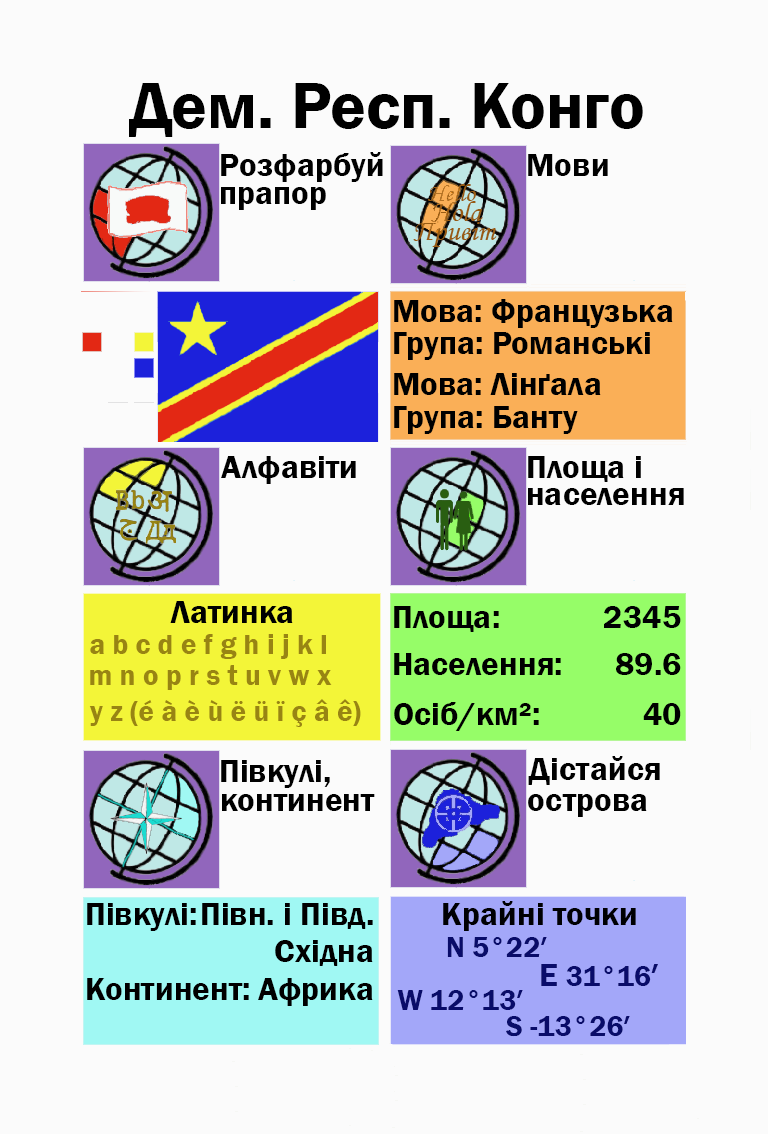
<style>
.page{position:relative;width:768px;height:1134px;background:#fbfbfb}
.page>*{position:absolute;margin:0}
.t1{font:66.7px "FranklinGothic-Demi";color:#000000}
.t2{font:33.3px "FranklinGothic-Demi";color:#000000}
.t3{font:33.3px "FranklinGothic-Demi";color:#000003}
.t4{font:29.2px "FranklinGothic-Demi";color:#988413}
.t5{font:29.2px "FranklinGothic-Demi";color:#090c69}
.t6{font:33.3px "FranklinGothic-Demi";color:#090c69}
</style>
<div class="page">
<p class="t1" style="left:129px;top:83px;width:514px;height:54px">Дем. Респ. Конго</p>
<p class="t2" style="left:221px;top:152px;width:162px;height:30px">Розфарбуй</p>
<p class="t2" style="left:528px;top:154px;width:80px;height:22px">Мови</p>
<p class="t2" style="left:221px;top:187px;width:105px;height:23px">прапор</p>
<p class="t2" style="left:394px;top:299px;width:279px;height:29px">Мова: Французька</p>
<p class="t2" style="left:394px;top:332px;width:256px;height:28px">Група: Романські</p>
<p class="t2" style="left:394px;top:373px;width:207px;height:22px">Мова: Лінґала</p>
<p class="t2" style="left:394px;top:406px;width:184px;height:28px">Група: Банту</p>
<p class="t2" style="left:221px;top:456px;width:135px;height:28px">Алфавіти</p>
<p class="t2" style="left:528px;top:456px;width:113px;height:26px">Площа і</p>
<p class="t2" style="left:528px;top:488px;width:156px;height:17px">населення</p>
<p class="t2" style="left:170px;top:601px;width:123px;height:22px">Латинка</p>
<p class="t2" style="left:394px;top:606px;width:105px;height:26px">Площа:</p>
<p class="t3" style="left:604px;top:606px;width:77px;height:22px">2345</p>
<p class="t4" style="left:90px;top:634px;width:236px;height:25px">a b c d e f g h i j k l</p>
<p class="t2" style="left:394px;top:653px;width:167px;height:22px">Населення:</p>
<p class="t2" style="left:616px;top:653px;width:65px;height:22px">89.6</p>
<p class="t4" style="left:90px;top:665px;width:242px;height:25px">m n o p r s t u v w x</p>
<p class="t4" style="left:89px;top:699px;width:272px;height:28px">y z (é à è ù ë ü ï ç â ê)</p>
<p class="t2" style="left:394px;top:702px;width:145px;height:29px">Осіб/км²:</p>
<p class="t2" style="left:643px;top:703px;width:38px;height:22px">40</p>
<p class="t2" style="left:221px;top:760px;width:109px;height:28px">Півкулі,</p>
<p class="t2" style="left:528px;top:756px;width:132px;height:29px">Дістайся</p>
<p class="t2" style="left:222px;top:794px;width:153px;height:17px">континент</p>
<p class="t2" style="left:528px;top:794px;width:119px;height:23px">острова</p>
<p class="t2" style="left:87px;top:903px;width:109px;height:28px">Півкулі:</p>
<p class="t2" style="left:202px;top:903px;width:171px;height:26px">Півн. і Півд.</p>
<p class="t3" style="left:443px;top:901px;width:193px;height:30px">Крайні точки</p>
<p class="t2" style="left:275px;top:940px;width:98px;height:26px">Східна</p>
<p class="t5" style="left:447px;top:937px;width:100px;height:20px">N 5°22′</p>
<p class="t5" style="left:541px;top:964px;width:117px;height:22px"><span class="t6">E </span>31°16<span class="t6">′</span></p>
<p class="t2" style="left:87px;top:978px;width:162px;height:22px">Континент:</p>
<p class="t2" style="left:258px;top:978px;width:115px;height:28px">Африка</p>
<p class="t5" style="left:397px;top:990px;width:126px;height:20px">W 12°13′</p>
<p class="t5" style="left:506px;top:1016px;width:124px;height:21px">S -13°26′</p>
</div>
